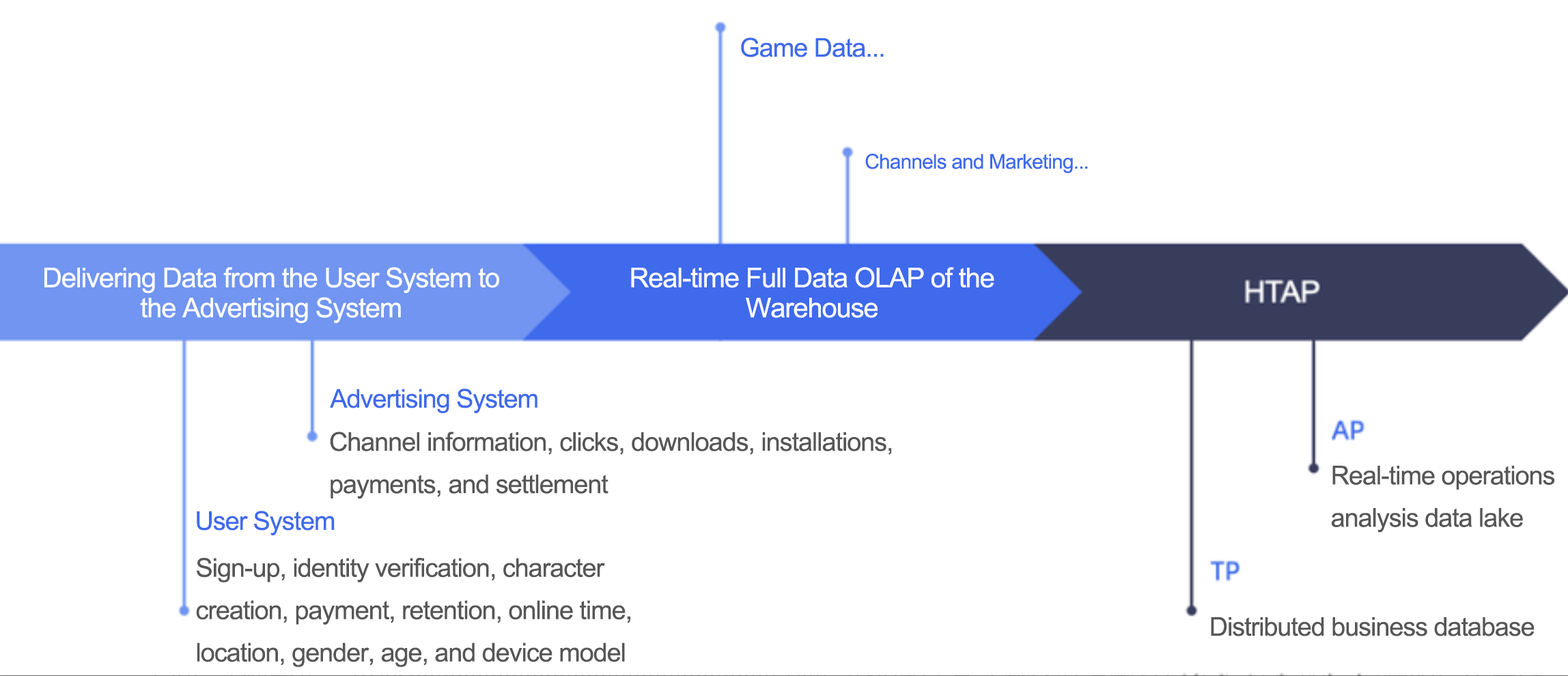
<style>
.page{position:relative;width:1568px;height:676px;background:#ffffff}
.page>*{position:absolute;margin:0}
.t1{font:26px "ArialMT";letter-spacing:-0.03em;color:#3f6aec}
.t2{font:20.5px "ArialMT";letter-spacing:-0.03em;color:#3f6aec}
.t3{font:27.3px/30px "ArialMT";letter-spacing:-0.03em;color:#ffffff}
.t4{font:26px/42.3px "ArialMT";letter-spacing:-0.03em;color:#565656}
.t5{font:26px "ArialMT";letter-spacing:-0.03em;color:#565656}
</style>
<div class="page">
<p class="t1" style="left:741px;top:38px;width:143px;height:19px">Game Data...</p>
<p class="t2" style="left:865px;top:154px;width:223px;height:19px">Channels and Marketing...</p>
<p class="t3" style="left:44px;top:267px;width:455px;height:57px;text-align:center">Delivering Data from the User System to the Advertising System</p>
<p class="t3" style="left:631px;top:267px;width:363px;height:51px;text-align:center">Real-time Full Data OLAP of the Warehouse</p>
<p class="t1" style="left:330px;top:389px;width:207px;height:24px">Advertising System</p>
<p class="t4" style="left:330px;top:432px;width:562px;height:67px">Channel information, clicks, downloads, installations, payments, and settlement</p>
<p class="t4" style="left:1331px;top:466px;width:224px;height:67px">Real-time operations analysis data lake</p>
<p class="t1" style="left:197px;top:511px;width:138px;height:24px">User System</p>
<p class="t4" style="left:196px;top:558px;width:434px;height:109px">Sign-up, identity verification, character creation, payment, retention, online time, location, gender, age, and device model</p>
<p class="t5" style="left:1211px;top:617px;width:324px;height:19px">Distributed business database</p>
</div>
